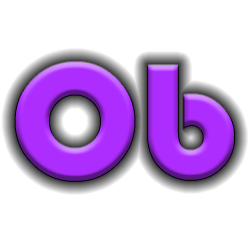
<style>
.page{position:relative;width:250px;height:250px;background:#ffffff}
.page>*{position:absolute;margin:0}
.t1{font:172.2px "Bauhaus93";color:#ad2dff}
</style>
<div class="page">
<p class="t1" style="left:14px;top:61px;width:221px;height:121px">Ob</p>
</div>
